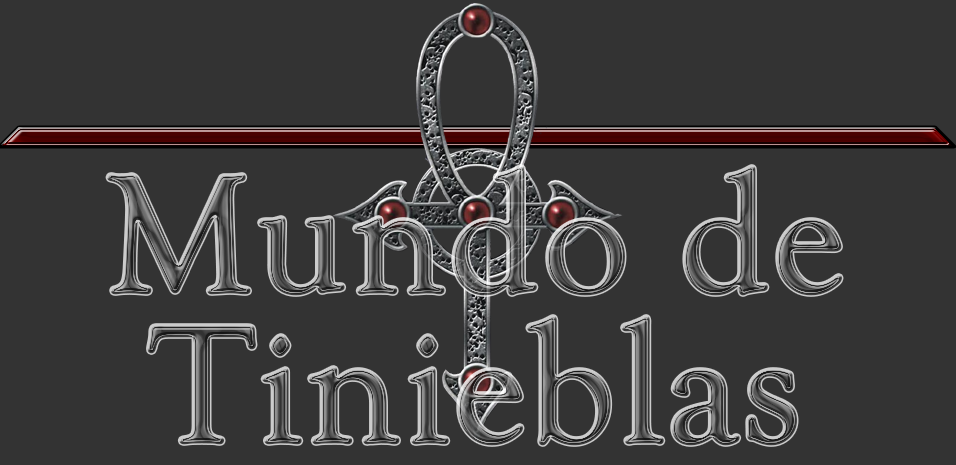
<style>
.page{position:relative;width:956px;height:465px;background:#333333}
.page>*{position:absolute;margin:0}
.t1{font:170px "GoudyOldStyleT-Regular";font-weight:bold}
</style>
<div class="page">
<p class="t1" style="left:107px;top:165px;width:735px;height:281px">Mundo de Tinieblas</p>
</div>
